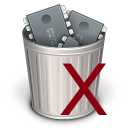
<style>
.page{position:relative;width:128px;height:128px;background:#ffffff}
.page>*{position:absolute;margin:0}
.t1{font:72px "ArialMT";color:#8a0010}
</style>
<div class="page">
<p class="t1" style="left:60px;top:63px;width:47px;height:52px">X</p>
</div>
